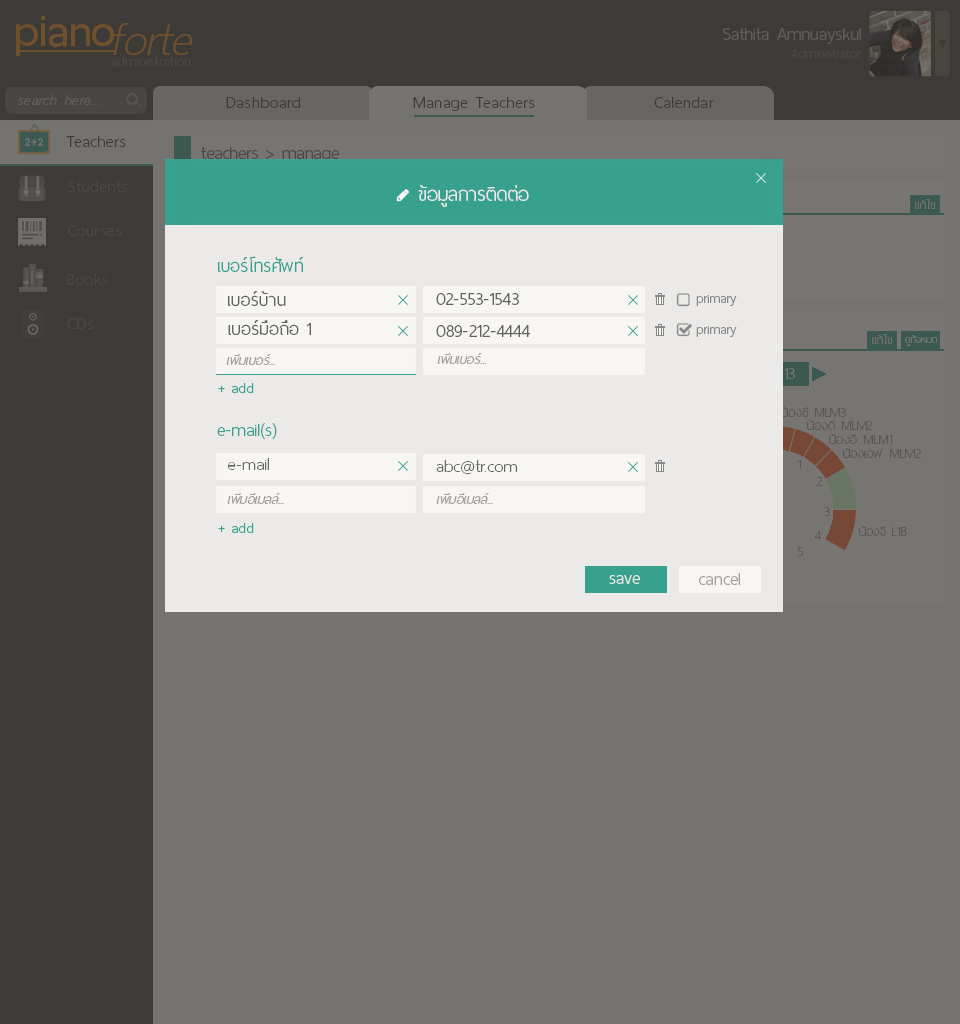
<style>
.page{position:relative;width:960px;height:1024px;background:#75736f}
.page>*{position:absolute;margin:0}
.t1{font:60px "ThaiSansNeue-SemiBold";letter-spacing:-0.005em;color:#6e502c}
.t2{font:62px "ThaiSansNeue-ExtraLightItalic";letter-spacing:-0.005em;color:#6e502c}
.t3{font:24px "ThaiSansNeue-Light";letter-spacing:-0.005em;color:#5f5d5a}
.t4{font:18px "ThaiSansNeue-Light";letter-spacing:-0.005em;color:#4a4843}
.t5{font:18.5px "ThaiSansNeue-ExtraLight";letter-spacing:0.025em;color:#4a4843}
.t6{font:20px "ThaiSansNeue-LightItalic";letter-spacing:0.025em;color:#605e5a}
.t7{font:22px "ThaiSansNeue-Light";letter-spacing:0.025em;color:#3d3b37}
.t8{font:24px "ThaiSansNeue-Light";letter-spacing:-0.005em;color:#484744}
.t9{font:22px "ThaiSansNeue-Light";letter-spacing:0.025em;color:#4a4843}
.t10{font:26px "ThaiSansNeue-Light";letter-spacing:-0.005em;color:#ebeae8}
.t11{font:16px "ThaiSansNeue-UltraLight";color:#777572}
.t12{font:24px "ThaiSansNeue-Light";color:#37a18e}
.t13{font:24px "ThaiSansNeue-Light";color:#636363}
.t14{font:18px "ThaiSansNeue-Light";color:#898989}
.t15{font:14px "ThaiSansNeue-UltraLight";color:#777572}
.t16{font:18px "ThaiSansNeue-LightItalic";color:#a2a1a0}
.t17{font:20px "ThaiSansNeue-Light";letter-spacing:-0.005em;color:#37a18e}
.t18{font:18px "ThaiSansNeue-UltraLight";letter-spacing:0.01em;color:#5a5855}
.t19{font:24px "ThaiSansNeue-UltraLight";letter-spacing:0.01em;color:#636363}
.t20{font:18px "ThaiSansNeue-UltraLight";color:#5a5855}
.t21{font:24px "ThaiSansNeue-Light";letter-spacing:-0.005em;color:#ebeae8}
.t22{font:24px "ThaiSansNeue-Light";color:#a2a1a0}
</style>
<div class="page">
<p class="t1" style="left:16px;top:16px;width:98px;height:40px">piano</p>
<p class="t2" style="left:113px;top:23px;width:80px;height:32px">forte</p>
<p class="t3" style="left:723px;top:28px;width:138px;height:16px">Sathita Amnuayskul</p>
<p class="t4" style="left:791px;top:49px;width:71px;height:9px">Administrator</p>
<p class="t5" style="left:111px;top:56px;width:80px;height:10px">administration</p>
<p class="t6" style="left:17px;top:95px;width:83px;height:10px">search here...</p>
<p class="t7" style="left:226px;top:97px;width:74px;height:11px">Dashboard</p>
<p class="t7" style="left:413px;top:97px;width:122px;height:14px">Manage Teachers</p>
<p class="t7" style="left:654px;top:97px;width:60px;height:11px">Calendar</p>
<p class="t7" style="left:66px;top:136px;width:60px;height:11px">Teachers</p>
<p class="t8" style="left:201px;top:147px;width:138px;height:16px">teachers &gt; manage</p>
<p class="t9" style="left:67px;top:181px;width:61px;height:11px">Students</p>
<p class="t10" style="left:418px;top:185px;width:111px;height:22px">ข้อมูลการติดต่อ</p>
<p class="t11" style="left:915px;top:199px;width:21px;height:10px">แก้ไข</p>
<p class="t9" style="left:68px;top:225px;width:54px;height:11px">Courses</p>
<p class="t12" style="left:218px;top:256px;width:85px;height:16px">เบอร์โทรศัพท์</p>
<p class="t9" style="left:67px;top:274px;width:41px;height:11px">Books</p>
<p class="t13" style="left:228px;top:291px;width:58px;height:15px">เบอร์บ้าน</p>
<p class="t13" style="left:436px;top:293px;width:83px;height:12px">02-553-1543</p>
<p class="t14" style="left:696px;top:295px;width:41px;height:11px">primary</p>
<p class="t9" style="left:67px;top:318px;width:27px;height:11px">CDs</p>
<p class="t13" style="left:228px;top:320px;width:83px;height:15px">เบอร์มือถือ 1</p>
<p class="t13" style="left:436px;top:325px;width:94px;height:12px">089-212-4444</p>
<p class="t14" style="left:696px;top:326px;width:41px;height:11px">primary</p>
<p class="t11" style="left:872px;top:334px;width:21px;height:10px">แก้ไข</p>
<p class="t15" style="left:905px;top:335px;width:33px;height:11px">ดูทั้งหมด</p>
<p class="t16" style="left:437px;top:353px;width:49px;height:11px">เพิ่มเบอร์...</p>
<p class="t16" style="left:226px;top:354px;width:49px;height:11px">เพิ่มเบอร์...</p>
<p class="t17" style="left:218px;top:383px;width:36px;height:10px">+ add</p>
<p class="t18" style="left:781px;top:407px;width:65px;height:10px">น้องซี MLM3</p>
<p class="t12" style="left:217px;top:423px;width:60px;height:16px">e-mail(s)</p>
<p class="t18" style="left:807px;top:420px;width:66px;height:10px">น้องดี MLM2</p>
<p class="t18" style="left:829px;top:434px;width:64px;height:10px">น้องอี MLM1</p>
<p class="t18" style="left:843px;top:448px;width:79px;height:10px">น้องเอฟ MLM2</p>
<p class="t19" style="left:228px;top:458px;width:41px;height:12px">e-mail</p>
<p class="t19" style="left:436px;top:460px;width:81px;height:14px">abc@tr.com</p>
<p class="t18" style="left:797px;top:460px;width:4px;height:9px">1</p>
<p class="t18" style="left:816px;top:477px;width:7px;height:9px">2</p>
<p class="t16" style="left:227px;top:493px;width:57px;height:11px">เพิ่มอีเมลล์...</p>
<p class="t16" style="left:436px;top:493px;width:57px;height:11px">เพิ่มอีเมลล์...</p>
<p class="t18" style="left:824px;top:507px;width:6px;height:9px">3</p>
<p class="t17" style="left:218px;top:523px;width:36px;height:10px">+ add</p>
<p class="t18" style="left:814px;top:531px;width:7px;height:9px">4</p>
<p class="t20" style="left:859px;top:526px;width:48px;height:10px">น้องจี L1B</p>
<p class="t18" style="left:798px;top:547px;width:6px;height:9px">5</p>
<p class="t21" style="left:609px;top:575px;width:31px;height:9px">save</p>
<p class="t22" style="left:699px;top:573px;width:41px;height:12px">cancel</p>
</div>
